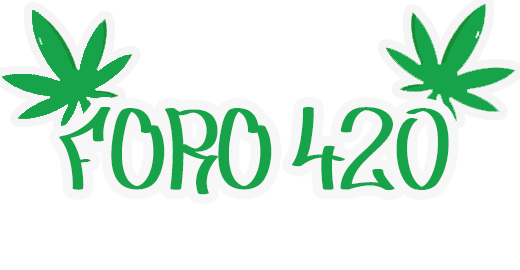
<style>
.page{position:relative;width:520px;height:270px;background:#ffffff}
.page>*{position:absolute;margin:0}
.t1{font:111.3px "Type2";letter-spacing:0.05em;color:#16a34a;scale:0.82 1}
</style>
<div class="page">
<p class="t1" style="left:59px;top:107px;width:390px;height:88px">FORO 420</p>
</div>
